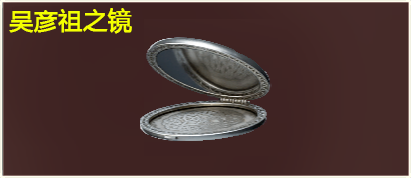
<style>
.page{position:relative;width:411px;height:178px}
.page>*{position:absolute;margin:0}
.t1{font:24px "MicrosoftYaHeiUI";color:#f4ff00;font-weight:bold}
</style>
<div class="page">
<p class="t1" style="left:9px;top:8px;width:123px;height:26px">吴彦祖之镜</p>
</div>
